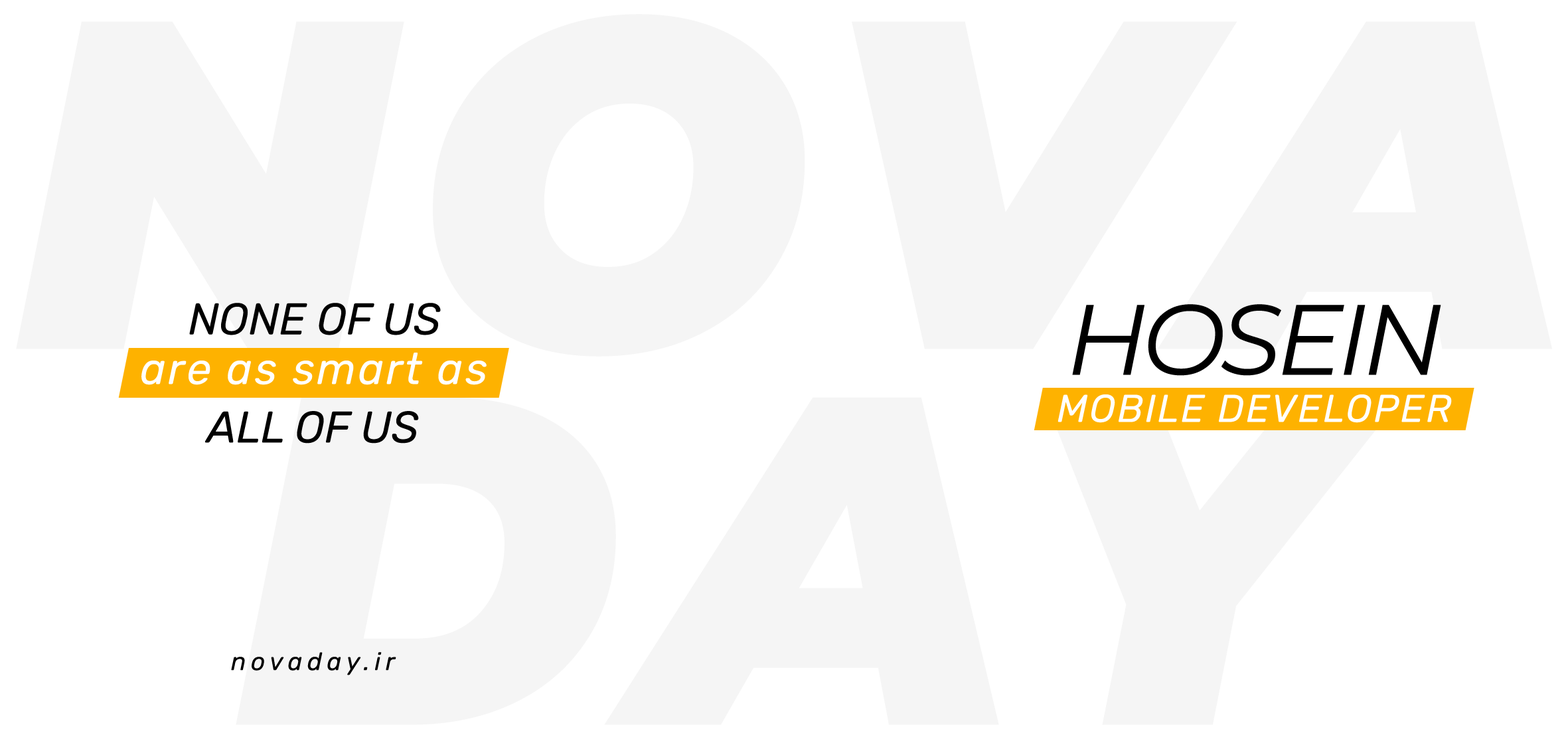
<style>
.page{position:relative;width:1568px;height:745px;background:#ffffff}
.page>*{position:absolute;margin:0}
.t1{font:44.3px "Rubik-Italic";color:#000000}
.t2{font:99.6px "Montserrat-Italic";letter-spacing:-0.05em;color:#000000}
.t3{font:44.3px "Rubik-Italic";letter-spacing:0.05em;color:#ffffff}
.t4{font:38.7px "Rubik-Italic";letter-spacing:0.05em;color:#ffffff}
.t5{font:24.9px "Rubik-Italic";letter-spacing:0.2em;color:#000000}
</style>
<div class="page">
<p class="t1" style="left:189px;top:303px;width:252px;height:32px">NONE OF US</p>
<p class="t2" style="left:1072px;top:304px;width:369px;height:72px">HOSEIN</p>
<p class="t3" style="left:141px;top:353px;width:346px;height:32px">are as smart as</p>
<p class="t4" style="left:1058px;top:394px;width:394px;height:29px">MOBILE DEVELOPER</p>
<p class="t1" style="left:205px;top:411px;width:214px;height:32px">ALL OF US</p>
<p class="t5" style="left:231px;top:652px;width:165px;height:23px">novaday.ir</p>
</div>
